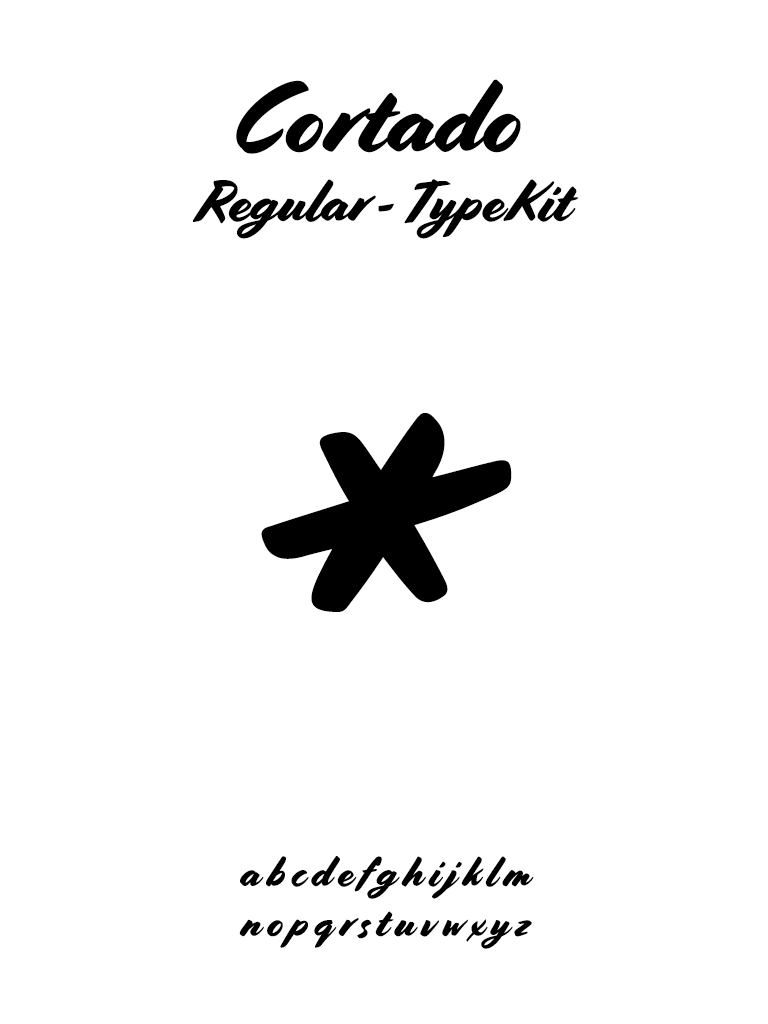
<style>
.page{position:relative;width:768px;height:1024px;background:#ffffff}
.page>*{position:absolute;margin:0}
.t1{font:58.3px "Cortado";color:#000000}
.t2{font:100px "Cortado";color:#000000}
.t3{font:723.2px "Cortado";color:#000000}
.t4{font:41.7px "Cortado";color:#000000}
</style>
<div class="page">
<p class="t1" style="left:193px;top:79px;width:386px;height:160px;text-align:center"><span class="t2">Cortado <br></span>Regular - TypeKit</p>
<p class="t3" style="left:261px;top:413px;width:251px;height:199px">*</p>
<p class="t4" style="left:239px;top:856px;width:295px;height:93px;text-align:center">a b c d e f g h i j k l m<br>n o p q r s t u v w x y z</p>
</div>
